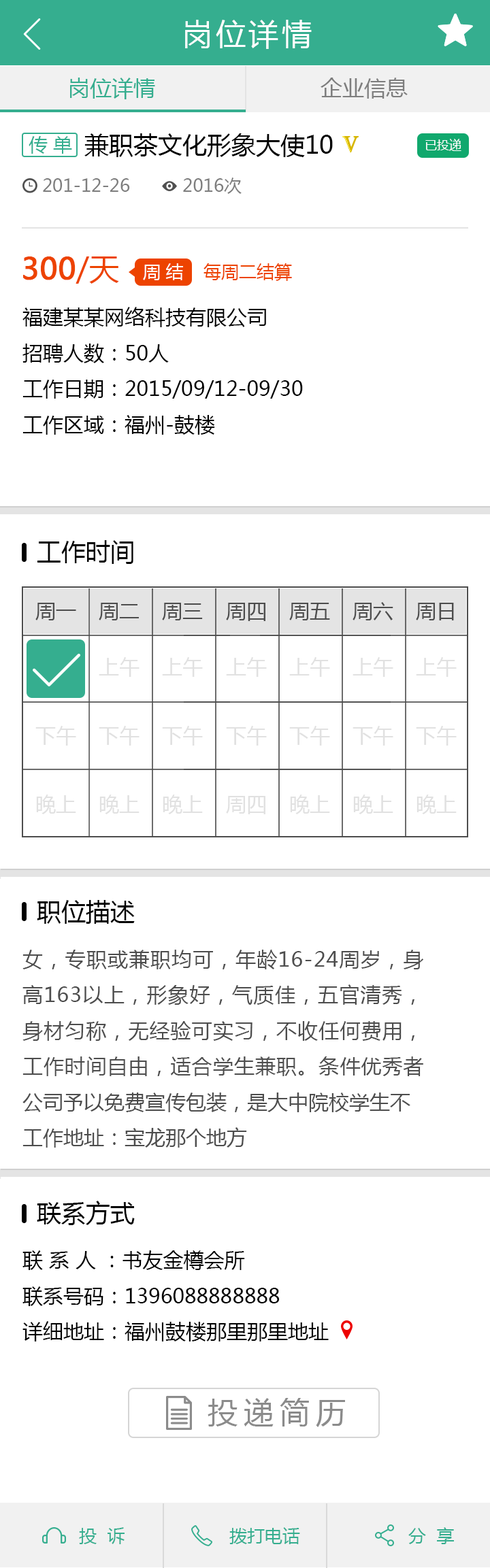
<style>
.page{position:relative;width:490px;height:1568px;background:#ffffff}
.page>*{position:absolute;margin:0}
.t1{font:29.9px "MicrosoftYaHei";letter-spacing:0.1em;color:#ffffff}
.t2{font:19px "MicrosoftYaHei";color:#35ae8f}
.t3{font:24.5px "MicrosoftYaHei";color:#000000}
.t4{font:12.2px "MicrosoftYaHei";color:#ffffff}
.t5{font:17.7px "MicrosoftYaHei";color:#7e7e7e}
.t6{font:29.9px "MicrosoftYaHei";color:#ed4300;font-weight:bold}
.t7{font:29.9px "MicrosoftYaHei";color:#ed4300}
.t8{font:17.7px "MicrosoftYaHei";color:#ffffff}
.t9{font:17.7px "MicrosoftYaHei";color:#ed4300}
.t10{font:20.4px "MicrosoftYaHei";color:#000000}
.t11{font:20.4px "MicrosoftYaHei";color:#4d4d4d}
.t12{font:29.9px "MicrosoftYaHei";letter-spacing:0.2em;color:#8b8b8b}
.t13{font:17.7px "MicrosoftYaHei";color:#35ae8f}
</style>
<div class="page">
<p class="t1" style="left:185px;top:20px;width:127px;height:29px">岗位详情</p>
<p class="t2" style="left:29px;top:136px;width:43px;height:18px">传 单</p>
<p class="t3" style="left:84px;top:133px;width:249px;height:24px">兼职茶文化形象大使10</p>
<p class="t4" style="left:425px;top:139px;width:36px;height:12px">已投递</p>
<p class="t5" style="left:43px;top:178px;width:198px;height:16px">201-12-26          2016次</p>
<p class="t6" style="left:23px;top:256px;width:96px;height:28px">300<span class="t7">/天</span></p>
<p class="t8" style="left:143px;top:263px;width:40px;height:17px">周 结</p>
<p class="t9" style="left:203px;top:263px;width:89px;height:18px">每周二结算</p>
<p class="t10" style="left:22px;top:307px;width:281px;height:128px">福建某某网络科技有限公司<br>招聘人数：50人<br>工作日期：2015/09/12-09/30<br>工作区域：福州-鼓楼</p>
<p class="t3" style="left:37px;top:540px;width:96px;height:24px">工作时间</p>
<p class="t11" style="left:35px;top:603px;width:41px;height:17px">周一</p>
<p class="t11" style="left:99px;top:603px;width:40px;height:17px">周二</p>
<p class="t11" style="left:162px;top:603px;width:41px;height:17px">周三</p>
<p class="t11" style="left:226px;top:603px;width:39px;height:18px">周四</p>
<p class="t11" style="left:289px;top:603px;width:41px;height:17px">周五</p>
<p class="t11" style="left:352px;top:602px;width:41px;height:18px">周六</p>
<p class="t11" style="left:416px;top:603px;width:38px;height:17px">周日</p>
<p class="t3" style="left:37px;top:900px;width:98px;height:24px">职位描述</p>
<p class="t11" style="left:22px;top:950px;width:401px;height:198px;text-align:justify">女，专职或兼职均可，年龄16-24周岁，身高163以上，形象好，气质佳，五官清秀，身材匀称，无经验可实习，不收任何费用，工作时间自由，适合学生兼职。条件优秀者公司予以免费宣传包装，是大中院校学生不<br>工作地址：宝龙那个地方</p>
<p class="t3" style="left:37px;top:1201px;width:98px;height:24px">联系方式</p>
<p class="t10" style="left:22px;top:1250px;width:307px;height:91px">联 系 人 ：书友金樽会所<br>联系号码：1396088888888<br>详细地址：福州鼓楼那里那里地址</p>
<p class="t12" style="left:207px;top:1398px;width:138px;height:29px">投递简历</p>
<p class="t13" style="left:79px;top:1527px;width:45px;height:17px">投  诉</p>
<p class="t13" style="left:79px;top:1527px;width:45px;height:17px">投  诉</p>
<p class="t13" style="left:229px;top:1527px;width:71px;height:17px">拨打电话</p>
<p class="t13" style="left:229px;top:1527px;width:71px;height:17px">拨打电话</p>
<p class="t13" style="left:408px;top:1527px;width:46px;height:17px">分  享</p>
<p class="t13" style="left:408px;top:1527px;width:46px;height:17px">分  享</p>
</div>
